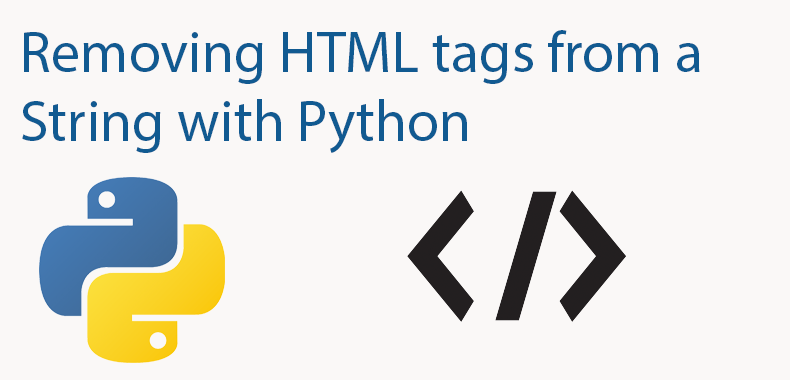
<style>
.page{position:relative;width:790px;height:380px;background:#faf8f7}
.page>*{position:absolute;margin:0}
.t1{font:58.1px "MyriadPro-Regular";color:#115a91}
</style>
<div class="page">
<p class="t1" style="left:22px;top:30px;width:678px;height:123px">Removing HTML tags from a String with Python</p>
</div>
